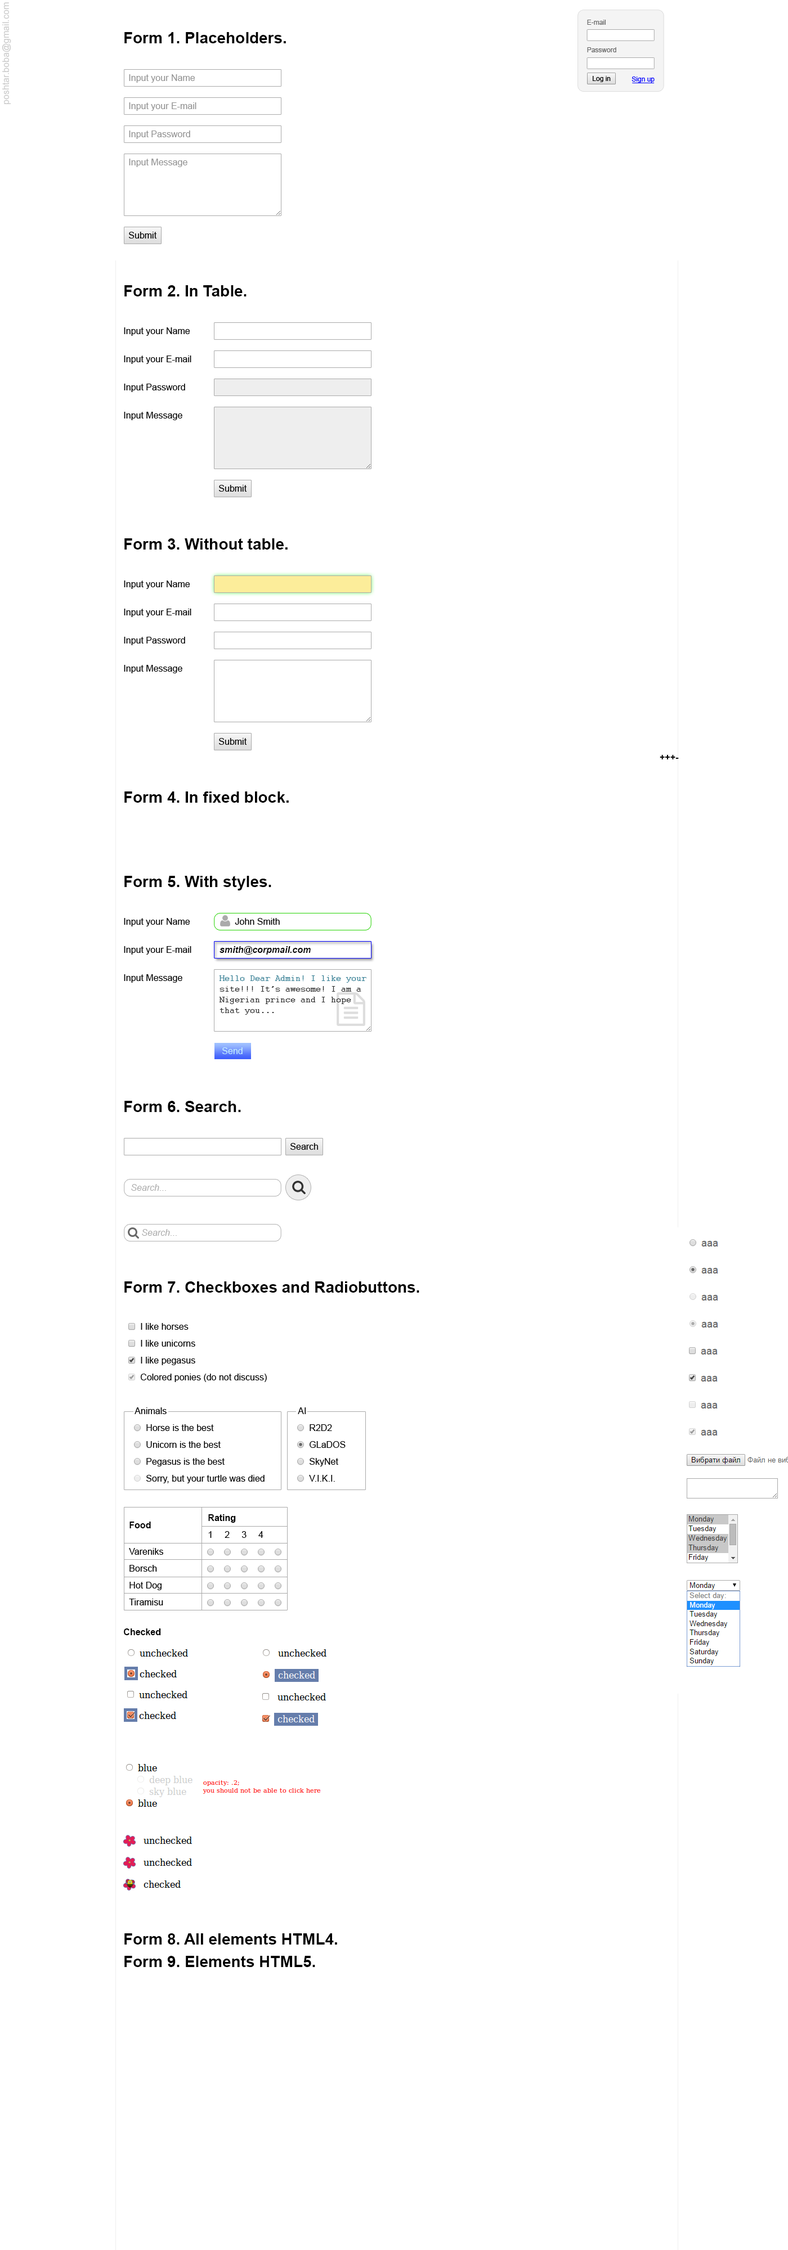
<style>
.page{position:relative;width:788px;height:2250px;background:#ffffff}
.page>*{position:absolute;margin:0}
.t1{font:6.8px "ArialMT";color:#666666}
.t2{font:15.8px "Arial-BoldMT";color:#000000}
.t3{font:9px "ArialMT";color:#939393}
.t4{font:6.8px "ArialMT";color:#000000}
.t5{font:6.8px "ArialMT";color:#0000ff}
.t6{font:9px "ArialMT";color:#000000}
.t7{font:9px "Arial-BoldMT";color:#000000}
.t8{font:9px "Arial-BoldItalicMT";color:#010101}
.t9{font:9px "Courier";color:#333333}
.t10{font:9px "Courier";color:#3a8196}
.t11{font:9px "ArialMT";color:#c3effe}
.t12{font:9px "Arial-ItalicMT";color:#aaaaaa}
</style>
<div class="page">
<p class="t1" style="left:587px;top:20px;width:18px;height:5px">E-mail</p>
<p class="t2" style="left:124px;top:32px;width:162px;height:11px">Form 1. Placeholders.</p>
<p class="t1" style="left:587px;top:47px;width:29px;height:5px">Password</p>
<p class="t3" style="left:129px;top:74px;width:66px;height:9px">Input your Name</p>
<p class="t4" style="left:592px;top:76px;width:18px;height:6px">Log in</p>
<p class="t5" style="left:631px;top:76px;width:23px;height:7px">Sign up</p>
<p class="t3" style="left:129px;top:102px;width:67px;height:9px">Input your E-mail</p>
<p class="t3" style="left:129px;top:130px;width:61px;height:9px">Input Password</p>
<p class="t3" style="left:129px;top:159px;width:58px;height:8px">Input Message</p>
<p class="t6" style="left:129px;top:232px;width:28px;height:6px">Submit</p>
<p class="t2" style="left:124px;top:285px;width:122px;height:11px">Form 2. In Table.</p>
<p class="t6" style="left:124px;top:327px;width:66px;height:9px">Input your Name</p>
<p class="t6" style="left:124px;top:356px;width:67px;height:8px">Input your E-mail</p>
<p class="t6" style="left:124px;top:384px;width:61px;height:8px">Input Password</p>
<p class="t6" style="left:124px;top:412px;width:58px;height:8px">Input Message</p>
<p class="t6" style="left:219px;top:485px;width:28px;height:7px">Submit</p>
<p class="t2" style="left:124px;top:538px;width:163px;height:12px">Form 3. Without table.</p>
<p class="t6" style="left:124px;top:580px;width:66px;height:9px">Input your Name</p>
<p class="t6" style="left:124px;top:609px;width:67px;height:8px">Input your E-mail</p>
<p class="t6" style="left:124px;top:637px;width:61px;height:8px">Input Password</p>
<p class="t6" style="left:124px;top:665px;width:58px;height:8px">Input Message</p>
<p class="t6" style="left:219px;top:738px;width:28px;height:7px">Submit</p>
<p class="t7" style="left:659px;top:755px;width:19px;height:4px">+++-</p>
<p class="t2" style="left:124px;top:791px;width:165px;height:12px">Form 4. In fixed block.</p>
<p class="t2" style="left:124px;top:876px;width:147px;height:14px">Form 5. With styles.</p>
<p class="t6" style="left:124px;top:918px;width:66px;height:8px">Input your Name</p>
<p class="t6" style="left:235px;top:918px;width:45px;height:7px">John Smith</p>
<p class="t6" style="left:124px;top:946px;width:67px;height:9px">Input your E-mail</p>
<p class="t8" style="left:219px;top:946px;width:91px;height:9px">smith@corpmail.com</p>
<p class="t6" style="left:124px;top:974px;width:58px;height:9px">Input Message</p>
<p class="t9" style="left:219px;top:975px;width:148px;height:40px"><span class="t10">Hello Dear Admin! I like your<br></span>site!!! It’s awesome! I am a<br>Nigerian prince and I hope<br>that you...</p>
<p class="t11" style="left:222px;top:1047px;width:20px;height:7px">Send</p>
<p class="t2" style="left:124px;top:1101px;width:117px;height:11px">Form 6. Search.</p>
<p class="t6" style="left:290px;top:1143px;width:28px;height:7px">Search</p>
<p class="t12" style="left:131px;top:1184px;width:35px;height:7px">Search...</p>
<p class="t12" style="left:142px;top:1229px;width:35px;height:7px">Search...</p>
<p class="t2" style="left:124px;top:1281px;width:295px;height:12px">Form 7. Checkboxes and Radiobuttons.</p>
<p class="t6" style="left:141px;top:1323px;width:47px;height:7px">I like horses</p>
<p class="t6" style="left:141px;top:1340px;width:54px;height:7px">I like unicorns</p>
<p class="t6" style="left:141px;top:1357px;width:54px;height:8px">I like pegasus</p>
<p class="t6" style="left:141px;top:1374px;width:126px;height:8px">Colored ponies (do not discuss)</p>
<p class="t6" style="left:134px;top:1407px;width:32px;height:7px">Animals</p>
<p class="t6" style="left:298px;top:1407px;width:8px;height:7px">AI</p>
<p class="t6" style="left:146px;top:1424px;width:68px;height:7px">Horse is the best</p>
<p class="t6" style="left:309px;top:1424px;width:23px;height:7px">R2D2</p>
<p class="t6" style="left:146px;top:1441px;width:74px;height:7px">Unicorn is the best</p>
<p class="t6" style="left:309px;top:1441px;width:36px;height:7px">GLaDOS</p>
<p class="t6" style="left:146px;top:1458px;width:78px;height:8px">Pegasus is the best</p>
<p class="t6" style="left:309px;top:1458px;width:29px;height:8px">SkyNet</p>
<p class="t6" style="left:146px;top:1475px;width:118px;height:8px">Sorry, but your turtle was died</p>
<p class="t6" style="left:309px;top:1475px;width:26px;height:7px">V.I.K.I.</p>
<p class="t7" style="left:208px;top:1514px;width:28px;height:9px">Rating</p>
<p class="t7" style="left:129px;top:1522px;width:22px;height:6px">Food</p>
<p class="t6" style="left:208px;top:1531px;width:4px;height:7px">1</p>
<p class="t6" style="left:224px;top:1531px;width:6px;height:7px">2</p>
<p class="t6" style="left:242px;top:1531px;width:4px;height:7px">3</p>
<p class="t6" style="left:258px;top:1531px;width:5px;height:7px">4</p>
<p class="t6" style="left:129px;top:1548px;width:34px;height:7px">Vareniks</p>
<p class="t6" style="left:129px;top:1565px;width:28px;height:7px">Borsch</p>
<p class="t6" style="left:129px;top:1582px;width:32px;height:8px">Hot Dog</p>
<p class="t6" style="left:129px;top:1599px;width:34px;height:6px">Tiramisu</p>
<p class="t7" style="left:124px;top:1628px;width:37px;height:7px">Checked</p>
<p class="t2" style="left:124px;top:1933px;width:213px;height:12px">Form 8. All elements HTML4.</p>
<p class="t2" style="left:124px;top:1956px;width:191px;height:11px">Form 9. Elements HTML5.</p>
</div>
